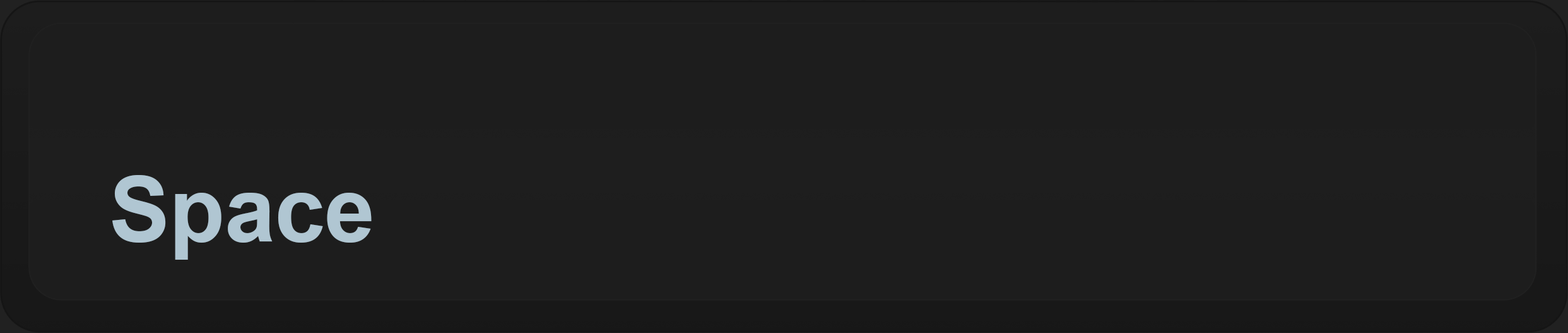
<style>
.page{position:relative;width:1568px;height:333px;background:#1d1d1d}
.page>*{position:absolute;margin:0}
.t1{font:90.9px "Arial-BoldMT";letter-spacing:-0.005em;color:#b0c6d2}
</style>
<div class="page">
<p class="t1" style="left:112px;top:175px;width:260px;height:84px">Space</p>
</div>
